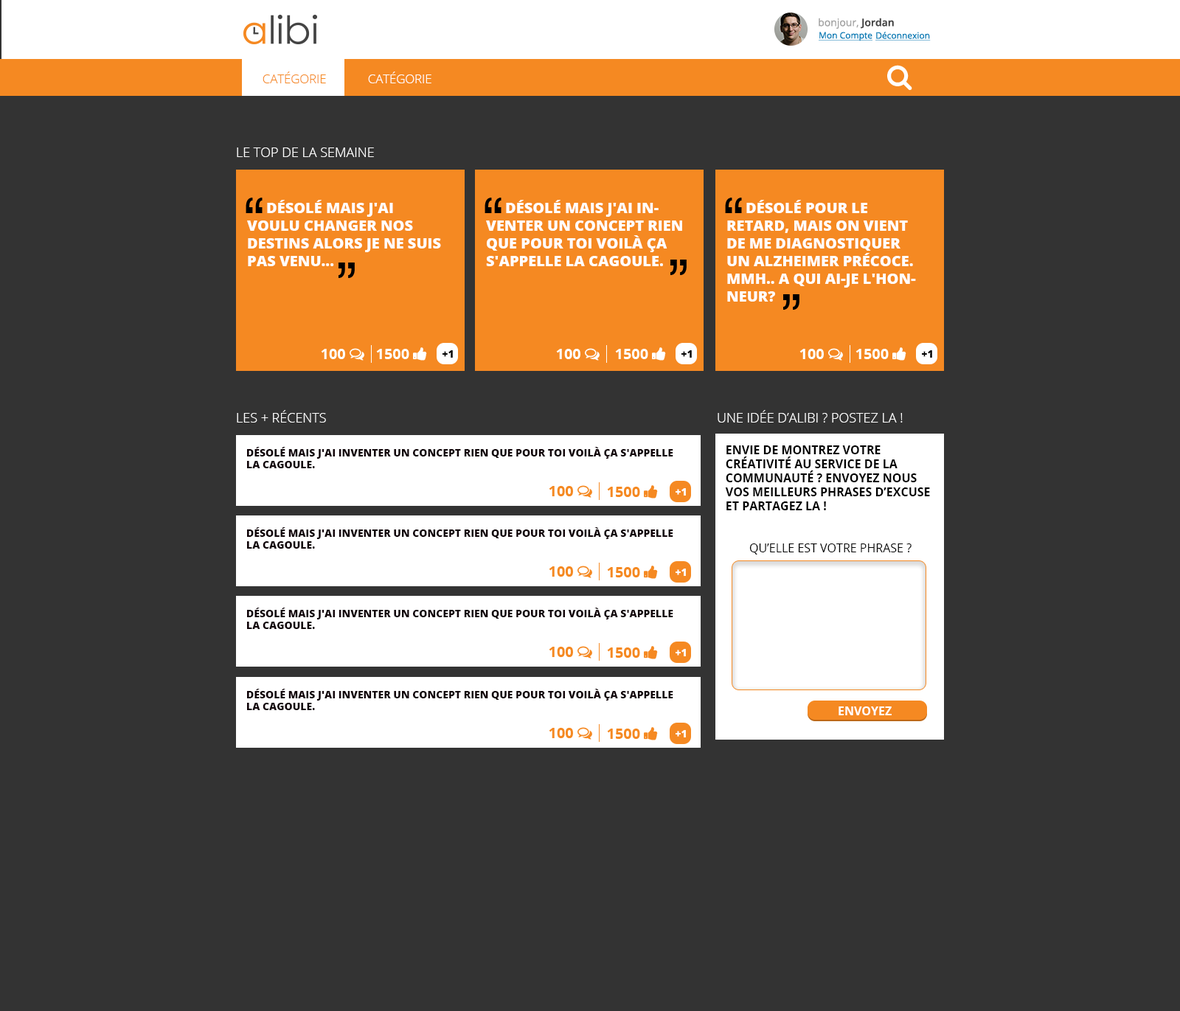
<style>
.page{position:relative;width:1180px;height:1011px;background:#333333}
.page>*{position:absolute;margin:0}
.t1{font:10.3px "OpenSans";color:#a2a2a2}
.t2{font:10.3px "OpenSans-Semibold";color:#444444}
.t3{font:8.8px "OpenSans";color:#0f7ab4;text-decoration:underline}
.t4{font:12.3px "OpenSans-Light";color:#f58922;text-transform:uppercase}
.t5{font:12.3px "OpenSans-Light";color:#ffffff;text-transform:uppercase}
.t6{font:13.3px "OpenSans-Light";color:#ffffff;text-transform:uppercase}
.t7{font:71.2px "Latha";letter-spacing:-0.08em;color:#000000;text-transform:uppercase}
.t8{font:14.7px "OpenSans-Extrabold";color:#ffffff;text-transform:uppercase}
.t9{font:10.3px "OpenSans-Extrabold";color:#000000;text-transform:uppercase}
.t10{font:10.3px "OpenSans-Extrabold";color:#110409;text-transform:uppercase}
.t11{font:11.8px "OpenSans-Bold";color:#000000;text-transform:uppercase}
.t12{font:10.3px "OpenSans-Extrabold";color:#ffffff;text-transform:uppercase}
.t13{font:11.8px "OpenSans";color:#000000;text-transform:uppercase}
.t14{font:11.8px "OpenSans-Bold";color:#ffffff;text-transform:uppercase}
</style>
<div class="page">
<p class="t1" style="left:818px;top:18px;width:76px;height:11px">bonjour, <span class="t2">Jordan</span></p>
<p class="t3" style="left:818px;top:32px;width:54px;height:9px">Mon Compte</p>
<p class="t3" style="left:875px;top:32px;width:55px;height:9px">Déconnexion</p>
<p class="t4" style="left:262px;top:72px;width:64px;height:11px">Catégorie</p>
<p class="t5" style="left:368px;top:72px;width:63px;height:11px">Catégorie</p>
<p class="t6" style="left:237px;top:147px;width:137px;height:10px">LE top de la Semaine</p>
<p class="t7" style="left:246px;top:198px;width:16px;height:15px">“</p>
<p class="t7" style="left:484px;top:198px;width:17px;height:15px">“</p>
<p class="t7" style="left:725px;top:198px;width:17px;height:15px">“</p>
<p class="t8" style="left:247px;top:200px;width:194px;height:66px">Désolé mais j'ai voulu changer nos destins alors je ne suis pas venu...</p>
<p class="t8" style="left:486px;top:200px;width:196px;height:66px">Désolé mais j'ai inventer un concept rien que pour toi voilà ça s'appelle la cagoule.</p>
<p class="t8" style="left:727px;top:200px;width:189px;height:102px">Désolé pour le retard, mais on vient de me diagnostiquer un Alzheimer précoce. Mmh.. A qui ai-je l'honneur?</p>
<p class="t7" style="left:338px;top:262px;width:17px;height:16px;rotate:180deg">“</p>
<p class="t7" style="left:670px;top:260px;width:16px;height:15px;rotate:180deg">“</p>
<p class="t7" style="left:783px;top:294px;width:16px;height:16px;rotate:180deg">“</p>
<p class="t9" style="left:442px;top:350px;width:11px;height:8px">+1</p>
<p class="t9" style="left:681px;top:350px;width:11px;height:8px">+1</p>
<p class="t9" style="left:922px;top:350px;width:10px;height:8px">+1</p>
<p class="t6" style="left:237px;top:410px;width:89px;height:12px">Les + récents</p>
<p class="t6" style="left:717px;top:410px;width:185px;height:12px">Une idée d’alibi ? Postez la !</p>
<p class="t10" style="left:247px;top:447px;width:426px;height:21px">Désolé mais j'ai inventer un concept rien que pour toi voilà ça s'appelle la cagoule.</p>
<p class="t11" style="left:725px;top:445px;width:205px;height:65px">Envie de montrez votre <br>créativité au service de la <br>communauté ? Envoyez nous vos meilleurs phrases d’excuse et partagez la !</p>
<p class="t12" style="left:675px;top:488px;width:11px;height:7px">+1</p>
<p class="t10" style="left:247px;top:527px;width:426px;height:22px">Désolé mais j'ai inventer un concept rien que pour toi voilà ça s'appelle la cagoule.</p>
<p class="t13" style="left:749px;top:543px;width:162px;height:11px">Qu’elle est votre phrase ?</p>
<p class="t12" style="left:675px;top:568px;width:11px;height:8px">+1</p>
<p class="t10" style="left:247px;top:608px;width:426px;height:21px">Désolé mais j'ai inventer un concept rien que pour toi voilà ça s'appelle la cagoule.</p>
<p class="t12" style="left:675px;top:649px;width:11px;height:7px">+1</p>
<p class="t10" style="left:247px;top:689px;width:426px;height:21px">Désolé mais j'ai inventer un concept rien que pour toi voilà ça s'appelle la cagoule.</p>
<p class="t14" style="left:838px;top:706px;width:53px;height:9px">ENVOYEZ</p>
<p class="t12" style="left:675px;top:730px;width:11px;height:7px">+1</p>
</div>
